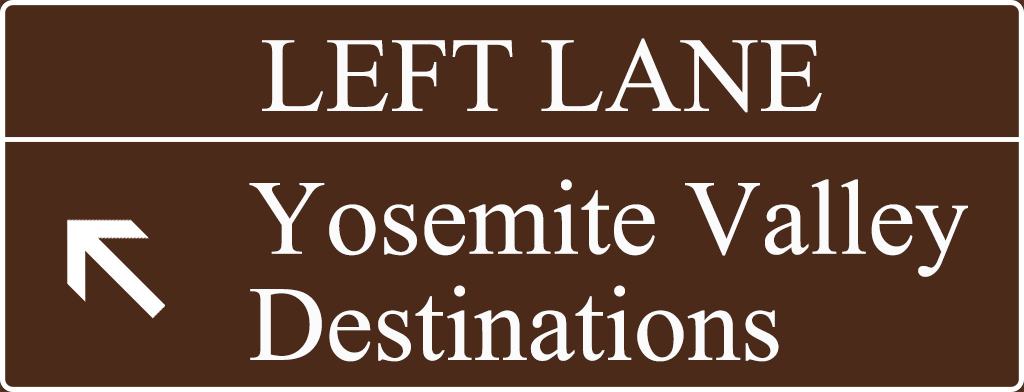
<style>
.page{position:relative;width:1024px;height:392px;background:#4c2a19}
.page>*{position:absolute;margin:0}
.t1{font:106.7px "IskoolaPota";color:#fbfbfb}
.t2{font:106.7px/106.1px "IskoolaPota";color:#fbfbfb}
</style>
<div class="page">
<p class="t1" style="left:262px;top:38px;width:560px;height:75px">LEFT LANE</p>
<p class="t2" style="left:249px;top:179px;width:719px;height:183px">Yosemite Valley<br>Destinations</p>
</div>
